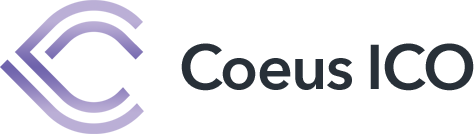
<style>
.page{position:relative;width:474px;height:134px;background:#ffffff}
.page>*{position:absolute;margin:0}
.t1{font:62.5px "AvenirNext-DemiBold";letter-spacing:-0.025em;color:#283038}
</style>
<div class="page">
<p class="t1" style="left:181px;top:43px;width:293px;height:48px">Coeus ICO</p>
</div>
